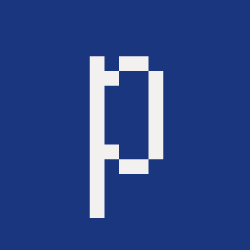
<style>
.page{position:relative;width:250px;height:250px;background:#19367e}
.page>*{position:absolute;margin:0}
.t1{font:250px "Handjet-Regular";color:#f2f1ef}
</style>
<div class="page">
<p class="t1" style="left:89px;top:56px;width:75px;height:163px">p</p>
</div>
